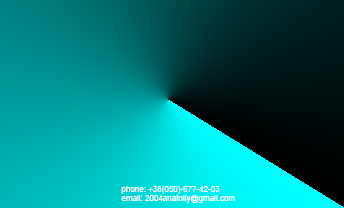
<style>
.page{position:relative;width:344px;height:208px}
.page>*{position:absolute;margin:0}
.t1{font:8px "ArialMT";color:#ffffff}
</style>
<div class="page">
<p class="t1" style="left:121px;top:186px;width:114px;height:17px">phone: +38(050)-677-42-03<br>email: 2004anatoliy@gmail.com</p>
</div>
